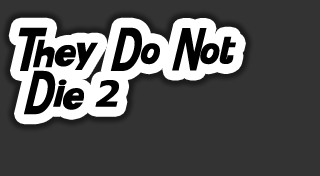
<style>
.page{position:relative;width:320px;height:176px;background:#333333}
.page>*{position:absolute;margin:0}
.t1{font:36px "KittyKatt";color:#000000}
</style>
<div class="page">
<p class="t1" style="left:18px;top:27px;width:218px;height:88px">They Do Not<br>Die 2</p>
</div>
